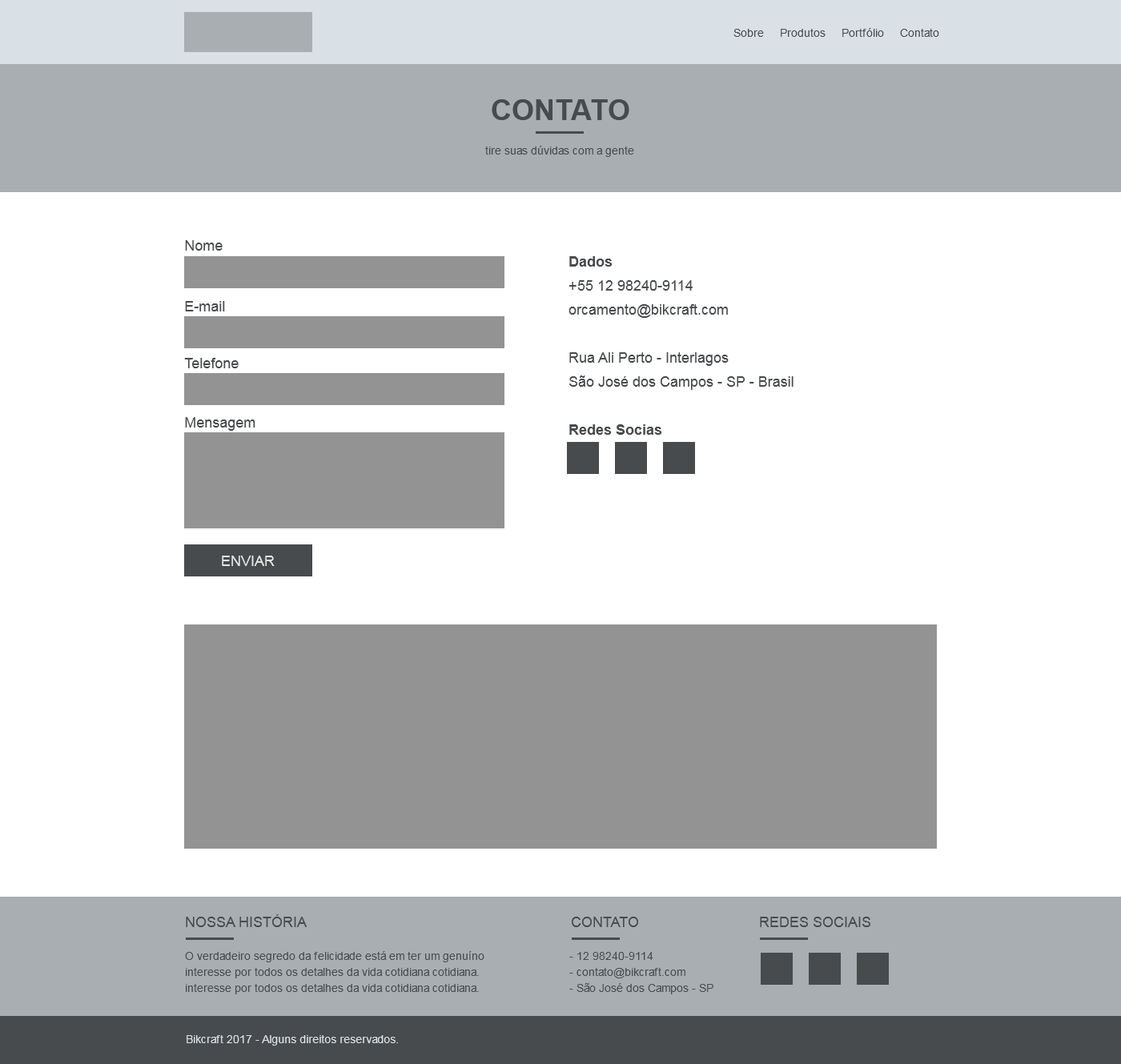
<style>
.page{position:relative;width:1121px;height:1064px;background:#ffffff}
.page>*{position:absolute;margin:0}
.t1{font:11.2px "ArialMT";color:#484b4d}
.t2{font:28.8px "Arial-BoldMT";color:#484b4d;text-transform:uppercase}
.t3{font:14.4px "ArialMT";color:#484b4d}
.t4{font:14.4px/24px "ArialMT";color:#484b4d}
.t5{font:14.4px/24px "Arial-BoldMT";color:#484b4d}
.t6{font:14.4px "ArialMT";color:#e4e4e4;text-transform:uppercase}
.t7{font:14.4px "ArialMT";color:#484b4d;text-transform:uppercase}
.t8{font:11.2px/16px "ArialMT";color:#484b4d}
.t9{font:11.2px "ArialMT";color:#d9e0e6}
</style>
<div class="page">
<p class="t1" style="left:733px;top:28px;width:206px;height:9px">Sobre     Produtos     Portfólio     Contato</p>
<p class="t2" style="left:492px;top:99px;width:137px;height:21px">contato</p>
<p class="t1" style="left:485px;top:146px;width:149px;height:11px">tire suas dúvidas com a gente</p>
<p class="t3" style="left:185px;top:240px;width:38px;height:11px">Nome</p>
<p class="t4" style="left:568px;top:256px;width:225px;height:179px"><span class="t5">Dados<br></span>+55 12 98240-9114<br>orcamento@bikcraft.com<br><br>Rua Ali Perto - Interlagos<br>São José dos Campos - SP - Brasil<br> <br><span class="t5">Redes Socias</span></p>
<p class="t3" style="left:185px;top:301px;width:40px;height:10px">E-mail</p>
<p class="t3" style="left:184px;top:358px;width:55px;height:10px">Telefone</p>
<p class="t3" style="left:185px;top:417px;width:70px;height:14px">Mensagem</p>
<p class="t6" style="left:222px;top:556px;width:53px;height:10px">Enviar</p>
<p class="t7" style="left:186px;top:914px;width:121px;height:13px">Nossa História</p>
<p class="t7" style="left:572px;top:917px;width:66px;height:10px">Contato</p>
<p class="t7" style="left:760px;top:917px;width:110px;height:10px">Redes sociais</p>
<p class="t8" style="left:185px;top:951px;width:299px;height:43px">O verdadeiro segredo da felicidade está em ter um genuíno interesse por todos os detalhes da vida cotidiana cotidiana.<br>interesse por todos os detalhes da vida cotidiana cotidiana.</p>
<p class="t8" style="left:569px;top:952px;width:144px;height:42px">- 12 98240-9114<br>- contato@bikcraft.com<br>- São José dos Campos - SP</p>
<p class="t9" style="left:187px;top:1035px;width:211px;height:11px">Bikcraft 2017 - Alguns direitos reservados.</p>
</div>
